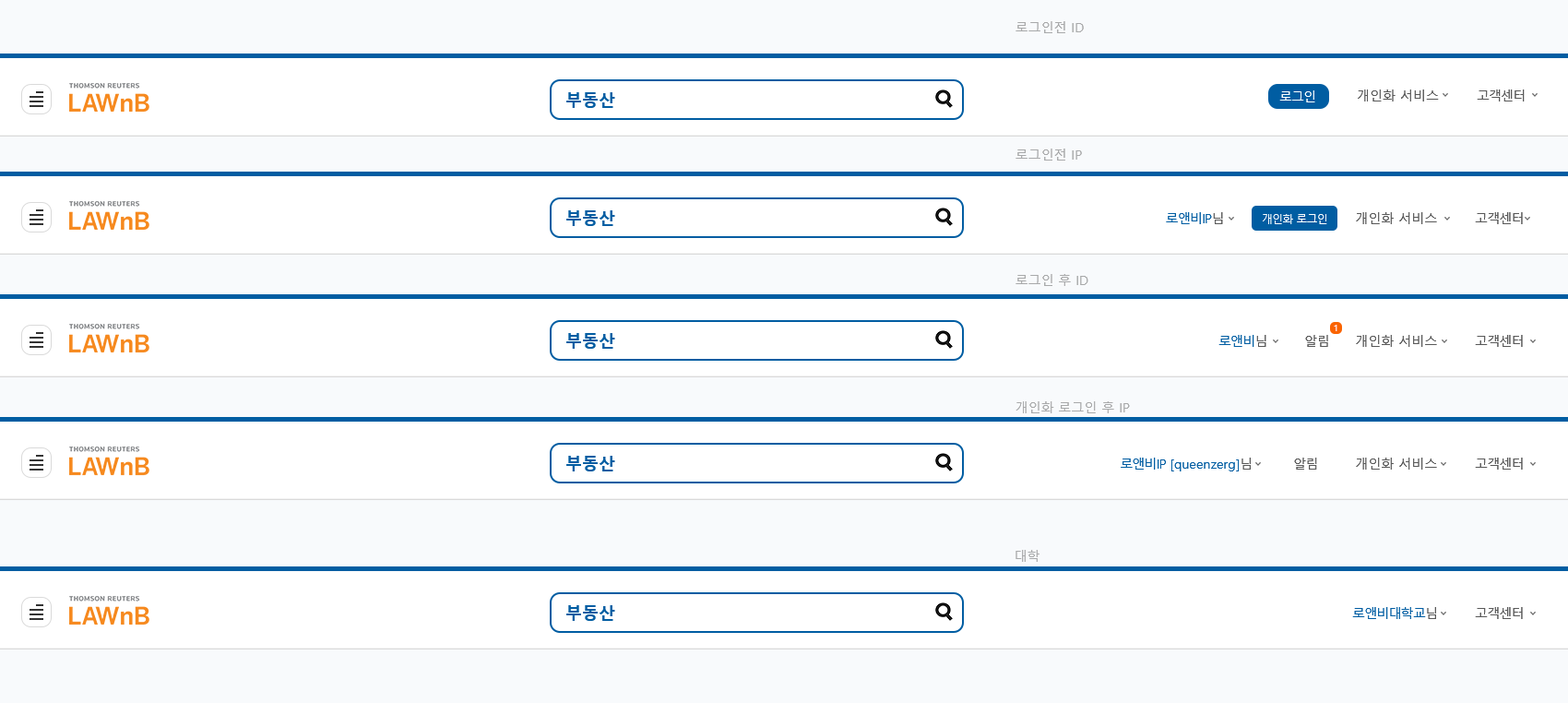
<style>
.page{position:relative;width:1568px;height:703px;background:#ffffff}
.page>*{position:absolute;margin:0}
.t1{font:12.9px "MalgunGothic";color:#a8a9aa}
.t2{font:12.9px "MalgunGothic";color:#585858}
.t3{font:12.9px "MalgunGothic";letter-spacing:-0.06em;color:#585858}
.t4{font:12.9px "MalgunGothic";letter-spacing:-0.06em;color:#ffffff}
.t5{font:12.9px "MalgunGothic";letter-spacing:-0.06em;color:#005da2}
.t6{font:11.1px "MalgunGothic";letter-spacing:-0.06em;color:#ffffff}
.t7{font:9.2px "MalgunGothic";letter-spacing:-0.06em}
.t8{font:12.9px "MalgunGothic";color:#005da2}
</style>
<div class="page">
<p class="t1" style="left:1016px;top:21px;width:68px;height:12px">로그인전 ID</p>
<p class="t2" style="left:1358px;top:89px;width:167px;height:12px"><span class="t3"> </span>개인화 서비스<span class="t3">          고객센터</span></p>
<p class="t4" style="left:1279px;top:90px;width:36px;height:12px">로그인</p>
<p class="t1" style="left:1016px;top:148px;width:66px;height:12px">로그인전 IP</p>
<p class="t2" style="left:1166px;top:212px;width:357px;height:12px"><span class="t5">로앤비IP</span><span class="t3">님                                   </span>개인화 서비스<span class="t3">          고객센터</span></p>
<p class="t6" style="left:1263px;top:214px;width:64px;height:10px">개인화 로그인</p>
<p class="t1" style="left:1016px;top:274px;width:72px;height:12px">로그인 후 ID</p>
<p class="t7" style="left:1334px;top:325px;width:3px;height:6px">1</p>
<p class="t3" style="left:1218px;top:335px;width:305px;height:12px"><span class="t5">로앤비</span>님          알림       <span class="t2">개인화 서비스</span>          고객센터</p>
<p class="t1" style="left:1016px;top:401px;width:114px;height:12px">개인화 로그인 후 IP</p>
<p class="t3" style="left:1121px;top:457px;width:402px;height:14px"><span class="t5">로앤비IP</span><span class="t8"> [queenzerg]</span>님           알림          <span class="t2">개인화 서비스</span>          고객센터</p>
<p class="t1" style="left:1016px;top:550px;width:23px;height:12px">대학</p>
<p class="t3" style="left:1352px;top:607px;width:171px;height:12px"><span class="t5">로앤비대학교</span>님          고객센터</p>
</div>
